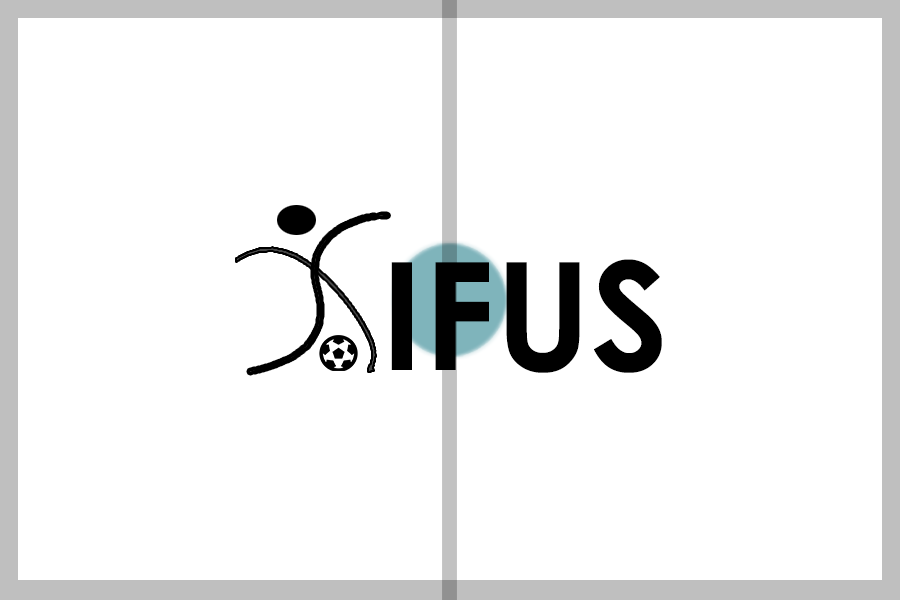
<style>
.page{position:relative;width:900px;height:600px;background:#ffffff}
.page>*{position:absolute;margin:0}
.t1{font:150px "CenturyGothic-Bold";color:#000000}
</style>
<div class="page">
<p class="t1" style="left:391px;top:259px;width:271px;height:114px">IFUS</p>
</div>
